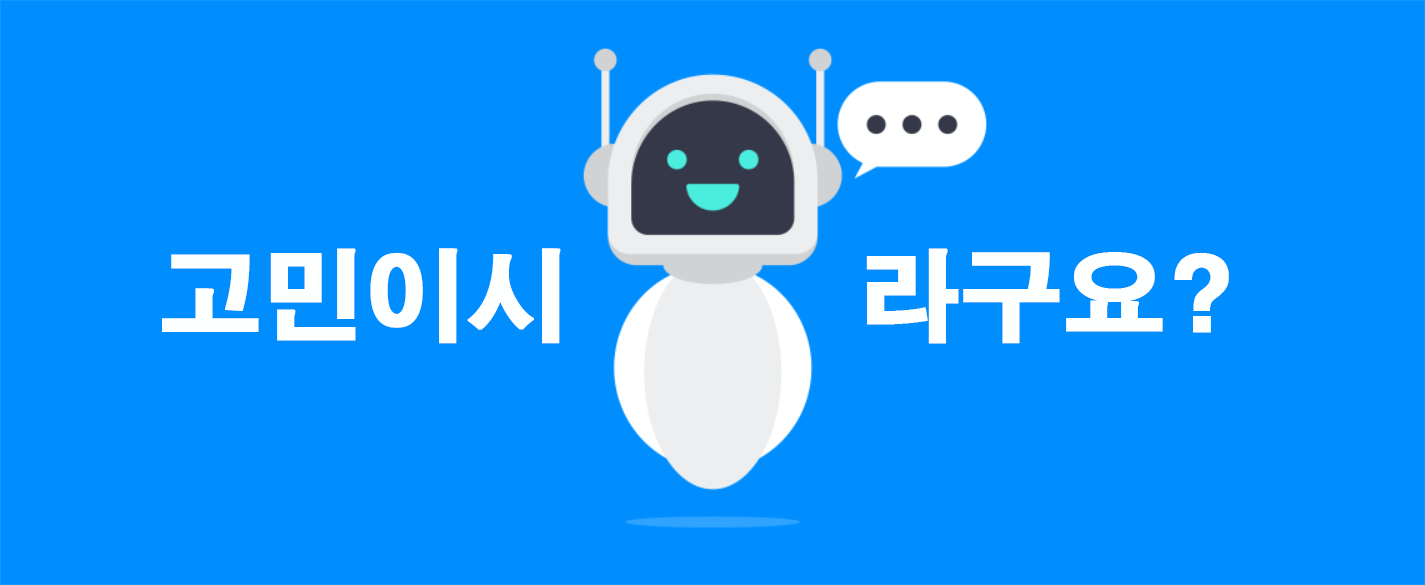
<style>
.page{position:relative;width:1425px;height:585px;background:#008eff}
.page>*{position:absolute;margin:0}
.t1{font:100px "H2gtrE";color:#feffff;font-weight:bold}
</style>
<div class="page">
<p class="t1" style="left:162px;top:248px;width:1067px;height:96px">고민이시        라구요?</p>
</div>
